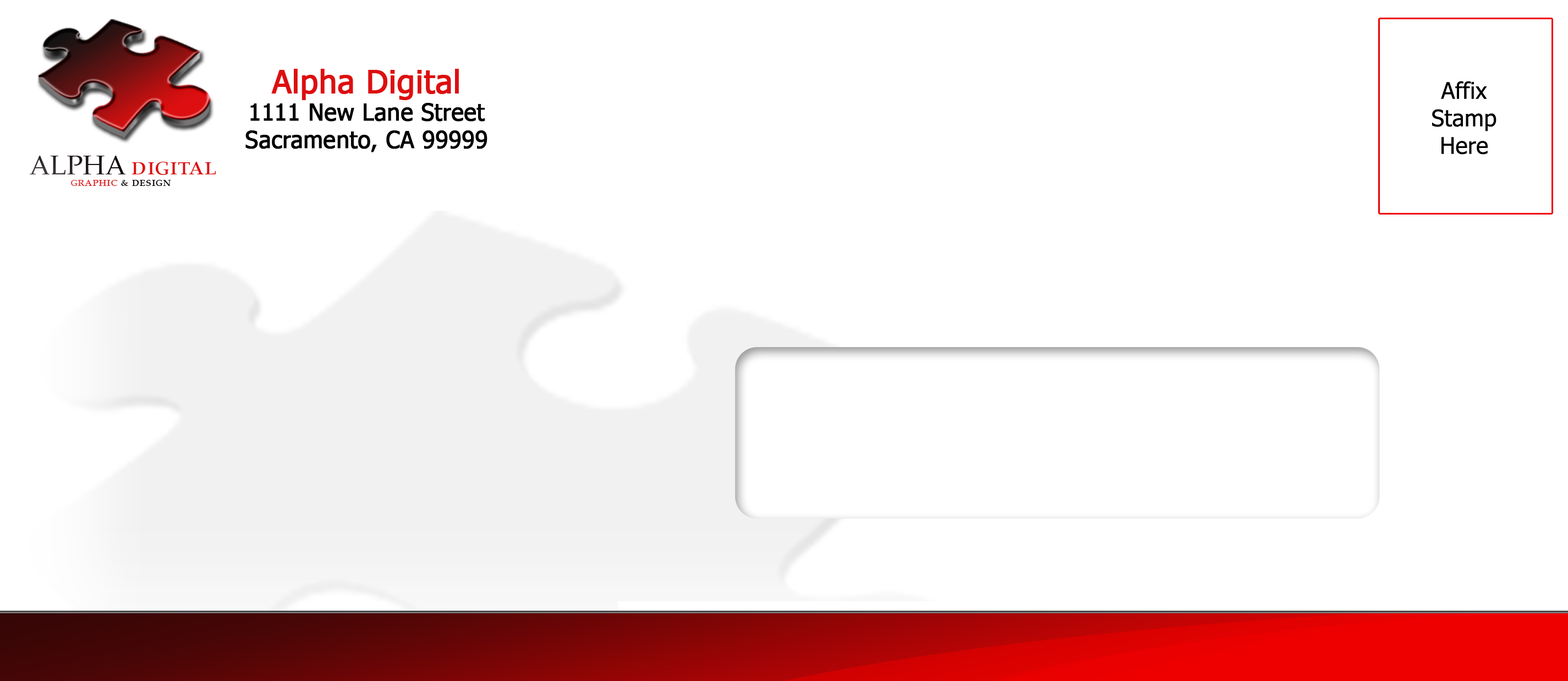
<style>
.page{position:relative;width:1568px;height:681px;background:#ffffff}
.page>*{position:absolute;margin:0}
.t1{font:22.9px "Tahoma";color:#000000;font-weight:bold}
.t2{font:32.1px "Tahoma";color:#dd0f10;font-weight:bold}
.t3{font:22.9px/27.5px "Tahoma";letter-spacing:0.01em;color:#000000}
.t4{font:26.9px "PalatinoLinotype-Roman";color:#dd0f10;font-variant:small-caps}
.t5{font:26.9px "PalatinoLinotype-Roman";color:#0f0707;font-variant:small-caps}
.t6{font:13.5px "PalatinoLinotype-Roman";color:#0f0707;font-variant:small-caps}
.t7{font:13.5px "PalatinoLinotype-Roman";color:#dd0f10;font-variant:small-caps}
</style>
<div class="page">
<p class="t1" style="left:245px;top:69px;width:242px;height:83px;text-align:center"><span class="t2">Alpha Digital<br></span>1111 New Lane Street<br>Sacramento, CA 99999</p>
<p class="t3" style="left:1432px;top:81px;width:64px;height:74px;text-align:center">Affix<br>Stamp<br>Here</p>
<p class="t4" style="left:29px;top:156px;width:187px;height:19px"><span class="t5">ALPHA </span>digital</p>
<p class="t6" style="left:71px;top:180px;width:100px;height:6px"><span class="t7">graphic </span>&amp; design</p>
</div>
